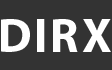
<style>
.page{position:relative;width:112px;height:70px;background:#333333}
.page>*{position:absolute;margin:0}
.t1{font:48.7px "MyriadPro-Bold";letter-spacing:0.05em;color:#ffffff}
</style>
<div class="page">
<p class="t1" style="left:1px;top:19px;width:110px;height:33px">DIRX</p>
</div>
